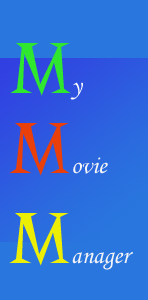
<style>
.page{position:relative;width:148px;height:300px;background:#2976de}
.page>*{position:absolute;margin:0}
.t1{font:75px "LaBambaLetPlain";color:#2ee72e}
.t2{font:25px "MonotypeCorsiva";color:#ffffff}
.t3{font:25px "MonotypeCorsiva";color:#f4f4f6}
.t4{font:75px "LaBambaLetPlain";color:#e93f0a}
.t5{font:75px "LaBambaLetPlain";color:#ecef04}
</style>
<div class="page">
<p class="t1" style="left:10px;top:43px;width:73px;height:57px">M<span class="t2">y</span></p>
<p class="t3" style="left:9px;top:123px;width:124px;height:147px"><span class="t4">M</span>ovie<br><span class="t5">M</span>anager</p>
</div>
